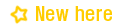
<style>
.page{position:relative;width:117px;height:25px;background:#ffffff}
.page>*{position:absolute;margin:0}
.t1{font:17px "HYKHeadLineStd-Medium";color:#ffcc00}
</style>
<div class="page">
<p class="t1" style="left:36px;top:6px;width:76px;height:15px">New here</p>
</div>
